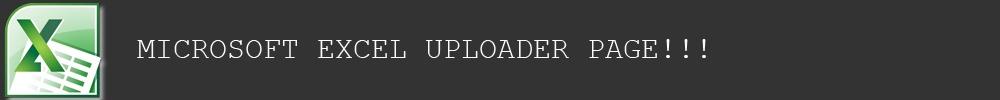
<style>
.page{position:relative;width:1000px;height:100px;background:#333333}
.page>*{position:absolute;margin:0}
.t1{font:30px "CourierNewPSMT";color:#fbfdfa}
</style>
<div class="page">
<p class="t1" style="left:137px;top:39px;width:569px;height:19px">MICROSOFT EXCEL UPLOADER PAGE!!!</p>
</div>
